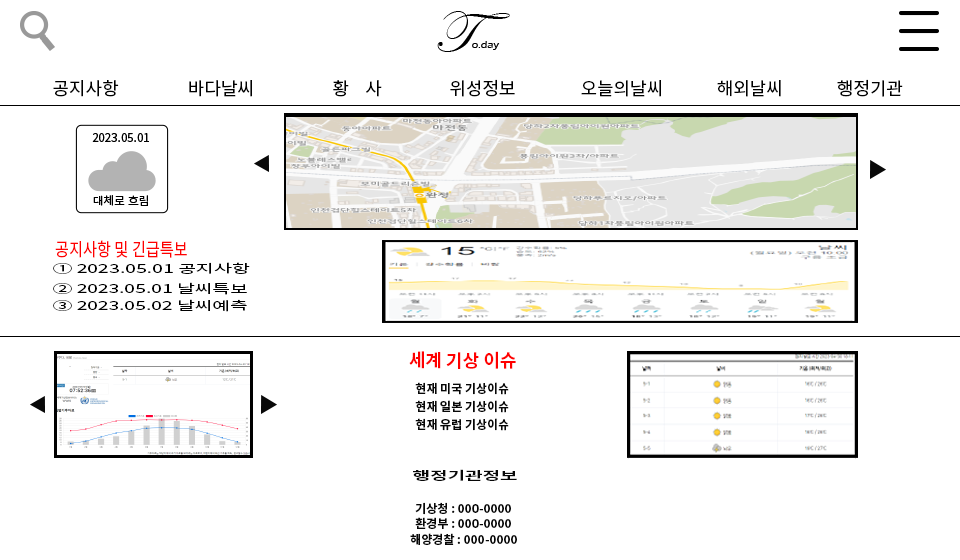
<style>
.page{position:relative;width:960px;height:560px;background:#ffffff}
.page>*{position:absolute;margin:0}
.t1{font:18px "NotoSansKR-Regular";color:#000000}
.t2{font:18.2px "NotoSansKR-Regular";color:#fe0101;scale:0.83 1}
.t3{font:11.9px "NotoSansKR-Regular";color:#000000;scale:1.63 1}
.t4{font:11.9px "NotoSansKR-Regular";color:#000000;scale:1.61 1}
.t5{font:18.2px "NotoSansKR-Bold";color:#ff0000}
.t6{font:12px "NotoSansKR-Bold";color:#070707}
.t7{font:11.9px "NotoSansKR-Bold";color:#070707;scale:1.59 1}
</style>
<div class="page">
<p class="t1" style="left:53px;top:80px;width:66px;height:17px">공지사항</p>
<p class="t1" style="left:189px;top:80px;width:63px;height:17px">바다날씨</p>
<p class="t1" style="left:333px;top:80px;width:49px;height:17px">황    사</p>
<p class="t1" style="left:450px;top:79px;width:65px;height:18px">위성정보</p>
<p class="t1" style="left:581px;top:80px;width:80px;height:17px">오늘의날씨</p>
<p class="t1" style="left:717px;top:80px;width:64px;height:17px">해외날씨</p>
<p class="t1" style="left:837px;top:79px;width:66px;height:18px">행정기관</p>
<p class="t2" style="left:55px;top:240px;width:132px;height:18px">공지사항 및 긴급특보</p>
<p class="t3" style="left:53px;top:262px;width:197px;height:12px">① 2023.05.01 공지사항</p>
<p class="t4" style="left:53px;top:282px;width:194px;height:13px">② 2023.05.01 날씨특보</p>
<p class="t4" style="left:53px;top:299px;width:194px;height:13px">③ 2023.05.02 날씨예측</p>
<p class="t5" style="left:409px;top:351px;width:107px;height:18px">세계 기상 이슈</p>
<p class="t6" style="left:415px;top:382px;width:94px;height:13px">현재 미국 기상이슈</p>
<p class="t6" style="left:415px;top:400px;width:94px;height:13px">현재 일본 기상이슈</p>
<p class="t6" style="left:415px;top:418px;width:94px;height:13px">현재 유럽 기상이슈</p>
<p class="t7" style="left:413px;top:469px;width:104px;height:12px">행정기관정보</p>
<p class="t6" style="left:415px;top:502px;width:96px;height:13px">기상청 : 000-0000</p>
<p class="t6" style="left:415px;top:517px;width:96px;height:12px">환경부 : 000-0000</p>
<p class="t6" style="left:410px;top:533px;width:107px;height:12px">해양경찰 : 000-0000</p>
</div>
